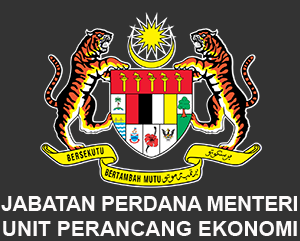
<style>
.page{position:relative;width:300px;height:241px;background:#333333}
.page>*{position:absolute;margin:0}
.t1{font:21px "Arial-BoldMT";letter-spacing:-0.02em;color:#fcfafa}
.t2{font:21px "Arial-BoldMT";color:#fcfafa}
</style>
<div class="page">
<p class="t1" style="left:1px;top:196px;width:296px;height:40px;text-align:center">JABATAN PERDANA MENTERI<br><span class="t2">UNIT PERANCANG EKONOMI</span></p>
</div>
